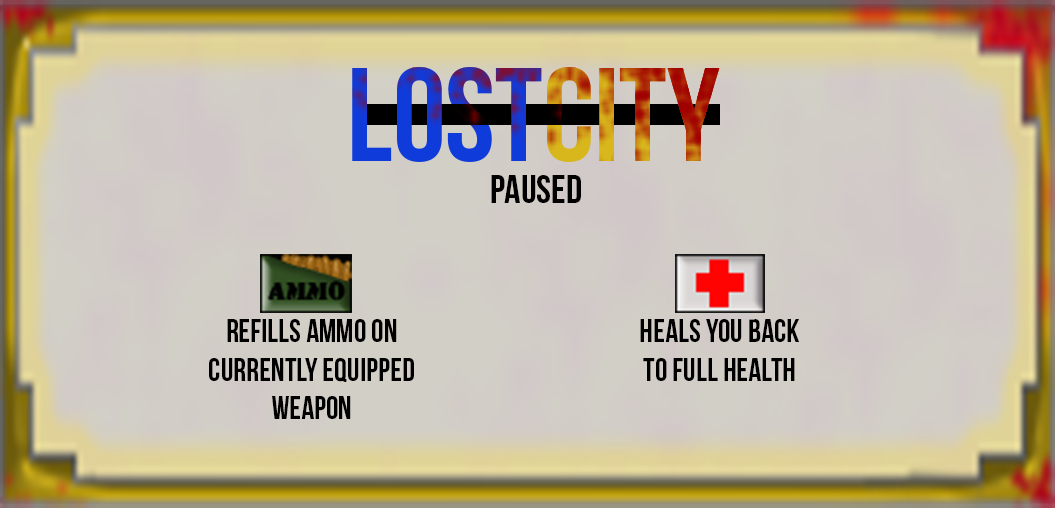
<style>
.page{position:relative;width:1055px;height:508px}
.page>*{position:absolute;margin:0}
.t1{font:40px "BebasNeueBold";color:#000000}
.t2{font:32px "BebasNeueBold";color:#000000}
</style>
<div class="page">
<p class="t1" style="left:491px;top:175px;width:90px;height:28px">Paused</p>
<p class="t2" style="left:209px;top:319px;width:205px;height:100px;text-align:center">Refills ammo on <br>currently equipped weapon</p>
<p class="t2" style="left:640px;top:319px;width:159px;height:62px;text-align:center">Heals you back to full health</p>
</div>
